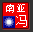
<style>
.page{position:relative;width:33px;height:32px;background:#f20000}
.page>*{position:absolute;margin:0}
.t1{font:10.4px "SimSun";color:#ffffff}
.t2{font:11.7px "SimSun";color:#ffffff}
</style>
<div class="page">
<p class="t1" style="left:6px;top:4px;width:19px;height:9px">南亚</p>
<p class="t2" style="left:16px;top:15px;width:11px;height:12px">冯</p>
</div>
